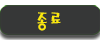
<style>
.page{position:relative;width:100px;height:40px;background:#363737}
.page>*{position:absolute;margin:0}
.t1{font:19.2px "MagicR-HM";color:#fbe90d;scale:1.04 1}
</style>
<div class="page">
<p class="t1" style="left:37px;top:12px;width:24px;height:19px">종료</p>
</div>
